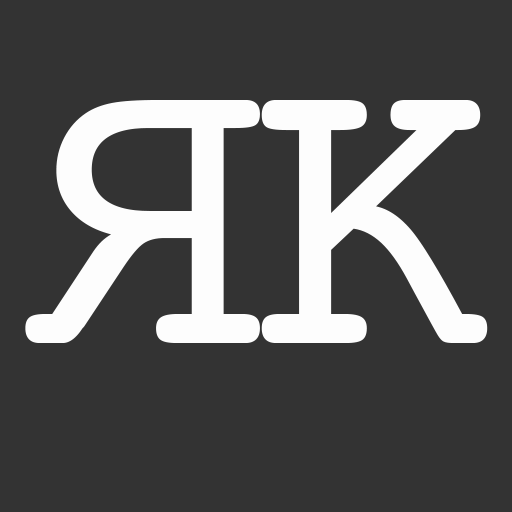
<style>
.page{position:relative;width:512px;height:512px;background:#333333}
.page>*{position:absolute;margin:0}
.t1{font:420px "Courier";color:#fafaff}
</style>
<div class="page">
<p class="t1" style="left:25px;top:100px;width:235px;height:243px;rotate:180deg">R</p>
<p class="t1" style="left:261px;top:100px;width:227px;height:243px">K</p>
</div>
